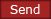
<style>
.page{position:relative;width:51px;height:19px;background:#a42423}
.page>*{position:absolute;margin:0}
.t1{font:12px "Verdana";color:#ffffff}
</style>
<div class="page">
<p class="t1" style="left:10px;top:4px;width:30px;height:10px">Send</p>
</div>
